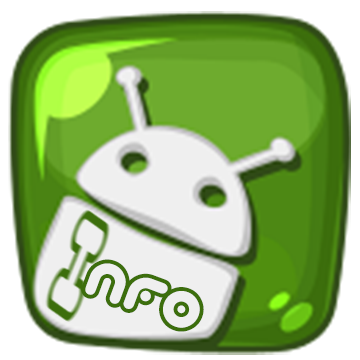
<style>
.page{position:relative;width:360px;height:360px}
.page>*{position:absolute;margin:0}
.t1{font:50px "TechniqueOLBRK";color:#3c6e0c}
</style>
<div class="page">
<p class="t1" style="left:81px;top:259px;width:123px;height:73px;rotate:20deg">nfo</p>
</div>
